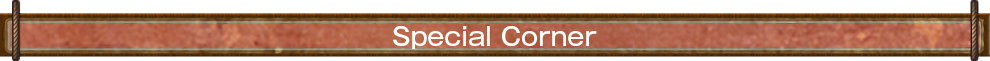
<style>
.page{position:relative;width:990px;height:61px;background:#ffffff}
.page>*{position:absolute;margin:0}
.t1{font:25px "GothicMB101Pro-Medium";color:#fffffa}
</style>
<div class="page">
<p class="t1" style="left:393px;top:26px;width:204px;height:23px">Special Corner</p>
</div>
